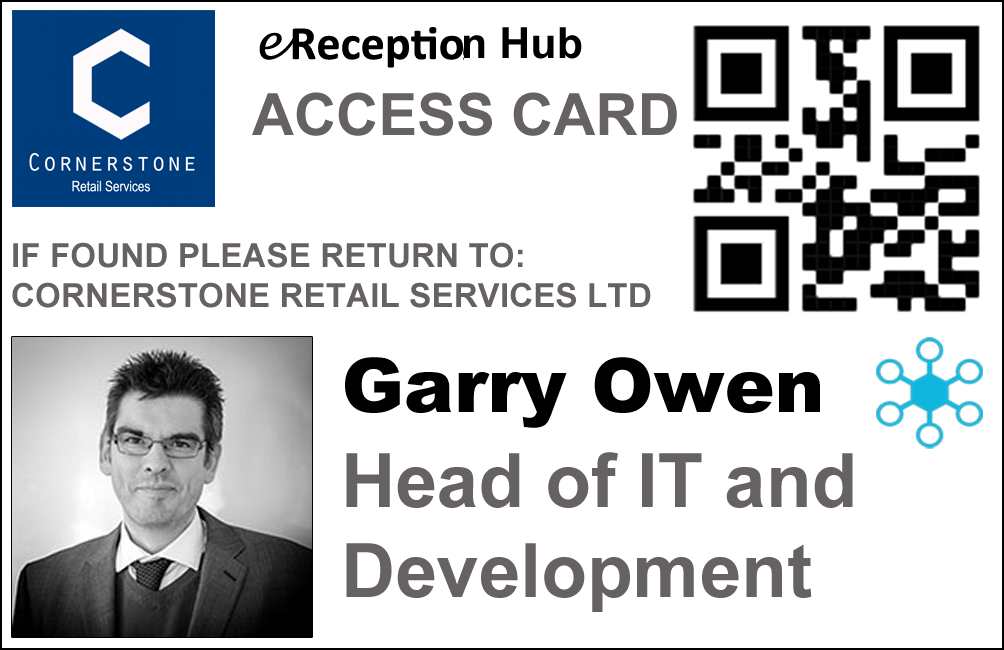
<style>
.page{position:relative;width:1004px;height:650px;background:#ffffff}
.page>*{position:absolute;margin:0}
.t1{font:58.3px "Arial-BoldMT";color:#676262}
.t2{font:33.3px "Arial-BoldMT";color:#676262}
.t3{font:75px "Arial-Black";color:#000000}
.t4{font:75px "Arial-BoldMT";color:#676262}
</style>
<div class="page">
<p class="t1" style="left:252px;top:92px;width:425px;height:44px">ACCESS CARD</p>
<p class="t2" style="left:12px;top:242px;width:639px;height:66px">IF FOUND PLEASE RETURN TO:<br>CORNERSTONE RETAIL SERVICES LTD</p>
<p class="t3" style="left:345px;top:357px;width:475px;height:71px">Garry Owen</p>
<p class="t4" style="left:346px;top:452px;width:507px;height:160px">Head of IT and<br>Development</p>
</div>
